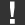
<style>
.page{position:relative;width:25px;height:25px;background:#333333}
.page>*{position:absolute;margin:0}
.t1{font:31px "HelveticaNeue-Bold";color:#ffffff}
</style>
<div class="page">
<p class="t1" style="left:10px;top:1px;width:5px;height:23px">!</p>
</div>
